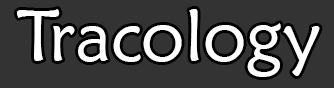
<style>
.page{position:relative;width:334px;height:88px;background:#333333}
.page>*{position:absolute;margin:0}
.t1{font:72px "MaiandraGD-Regular";color:#ffffff}
</style>
<div class="page">
<p class="t1" style="left:17px;top:9px;width:303px;height:68px">Tracology</p>
</div>
